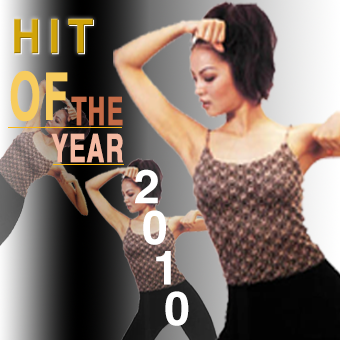
<style>
.page{position:relative;width:340px;height:340px}
.page>*{position:absolute;margin:0}
.t1{font:81px "Helvetica-Bold";letter-spacing:0.16em;color:#d0a308;font-weight:bold;scale:0.87 1}
.t2{font:112.1px "Helvetica-Bold";letter-spacing:0.04em;color:#f7cc5e;font-weight:bold;scale:0.62 1}
.t3{font:66.6px "Helvetica-Bold";letter-spacing:0.04em;color:#c46b47;font-weight:bold;scale:0.62 1}
.t4{font:66.6px "Helvetica-Bold";letter-spacing:0.04em;color:#f4b9a2;font-weight:bold;scale:0.62 1}
.t5{font:81px/40.6px "Helvetica-Bold";letter-spacing:-0.1em;color:#ffffff}
</style>
<div class="page">
<p class="t1" style="left:14px;top:18px;width:79px;height:36px">HIT</p>
<p class="t2" style="left:10px;top:70px;width:58px;height:52px">OF</p>
<p class="t3" style="left:71px;top:96px;width:52px;height:30px">THE</p>
<p class="t4" style="left:51px;top:133px;width:72px;height:30px">YEAR</p>
<p class="t5" style="left:135px;top:169px;width:54px;height:157px">2<br> 0<br> 1<br> 0</p>
</div>
